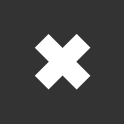
<style>
.page{position:relative;width:124px;height:124px;background:#333333}
.page>*{position:absolute;margin:0}
.t1{font:182.7px "DolceVitaHeavy-Bold";color:#ffffff}
</style>
<div class="page">
<p class="t1" style="left:34px;top:33px;width:57px;height:57px;rotate:45deg">+</p>
</div>
